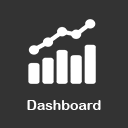
<style>
.page{position:relative;width:128px;height:128px;background:#333333}
.page>*{position:absolute;margin:0}
.t1{font:14px "ArialRoundedMTBold";color:#ffffff}
</style>
<div class="page">
<p class="t1" style="left:27px;top:100px;width:74px;height:10px">Dashboard</p>
</div>
